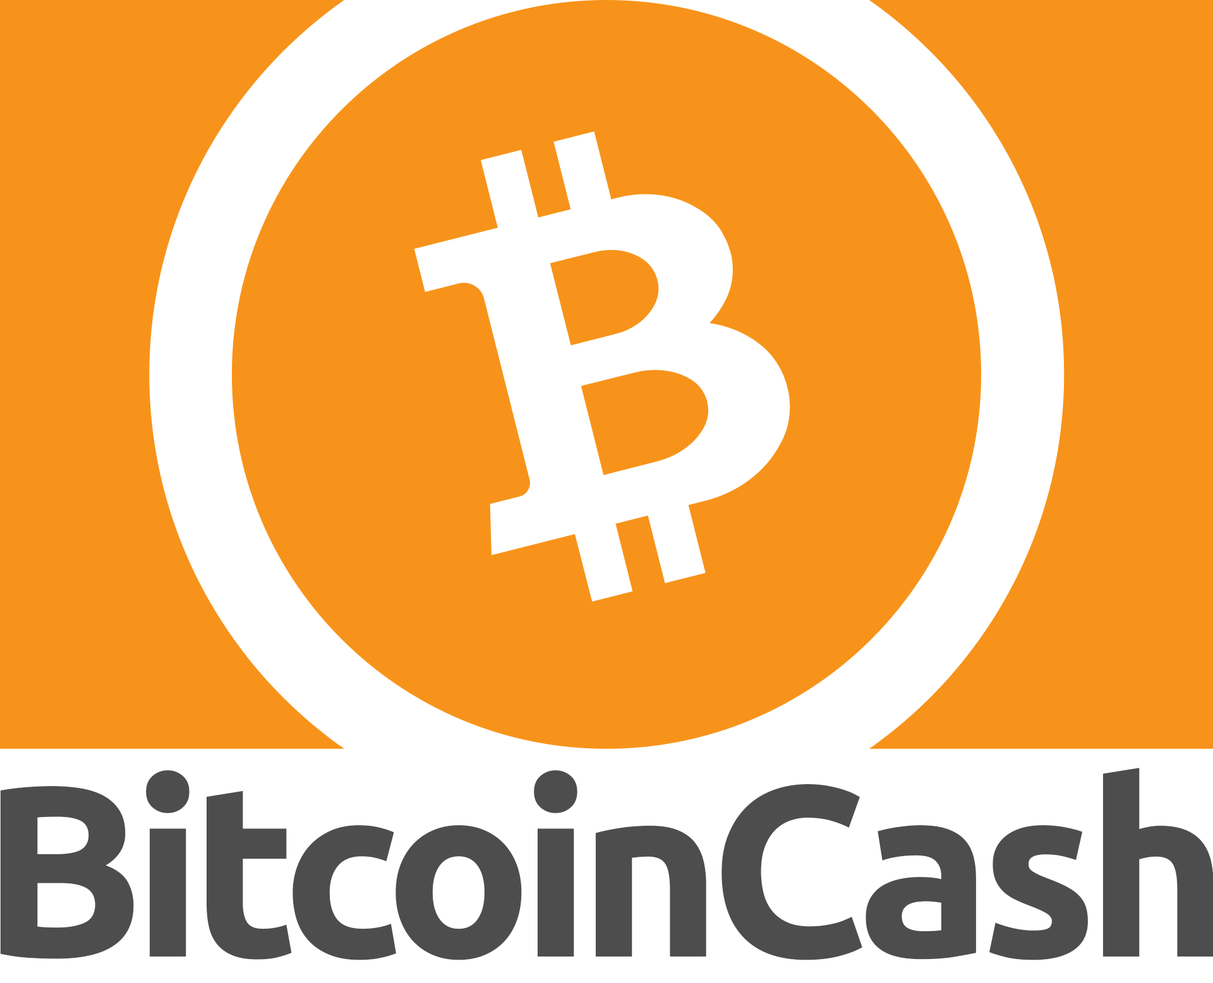
<style>
.page{position:relative;width:1213px;height:983px;background:#f7931a}
.page>*{position:absolute;margin:0}
.t1{font:243.1px "Ubuntu-Bold";letter-spacing:-0.05em;color:#4d4d4d}
</style>
<div class="page">
<p class="t1" style="left:0px;top:768px;width:1213px;height:193px">BitcoinCash</p>
</div>
